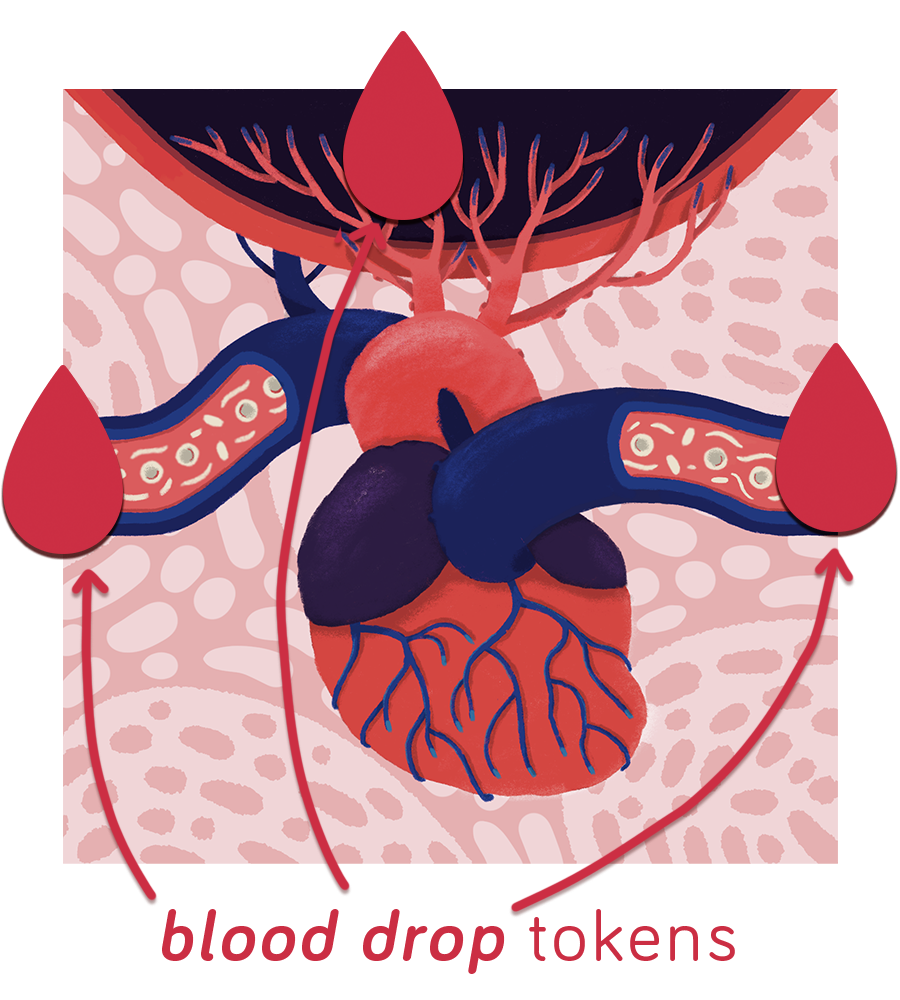
<style>
.page{position:relative;width:900px;height:1000px;background:#ffffff}
.page>*{position:absolute;margin:0}
.t1{font:72px "Bariol-BoldItalic";letter-spacing:0.06em;color:#cb2e43}
.t2{font:72px "Bariol";letter-spacing:0.06em;color:#cb2e43}
</style>
<div class="page">
<p class="t1" style="left:162px;top:909px;width:573px;height:65px">blood drop <span class="t2">tokens</span></p>
</div>
